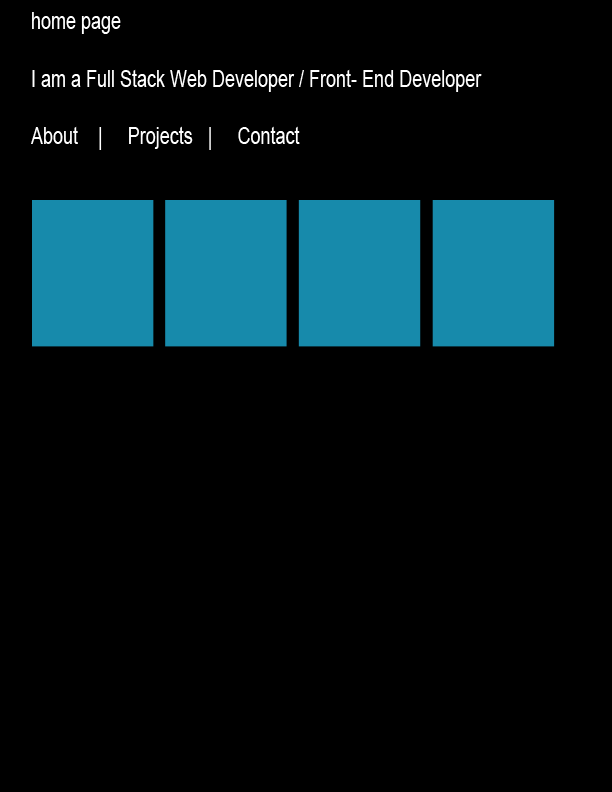
<style>
.page{position:relative;width:612px;height:792px;background:#000000}
.page>*{position:absolute;margin:0}
.t1{font:24px "ArialMT";color:#ffffff;scale:0.75 1}
</style>
<div class="page">
<p class="t1" style="left:31px;top:12px;width:451px;height:138px">home page<br><br>I am a Full Stack Web Developer / Front- End Developer<br><br>About    |     Projects   |     Contact</p>
</div>
